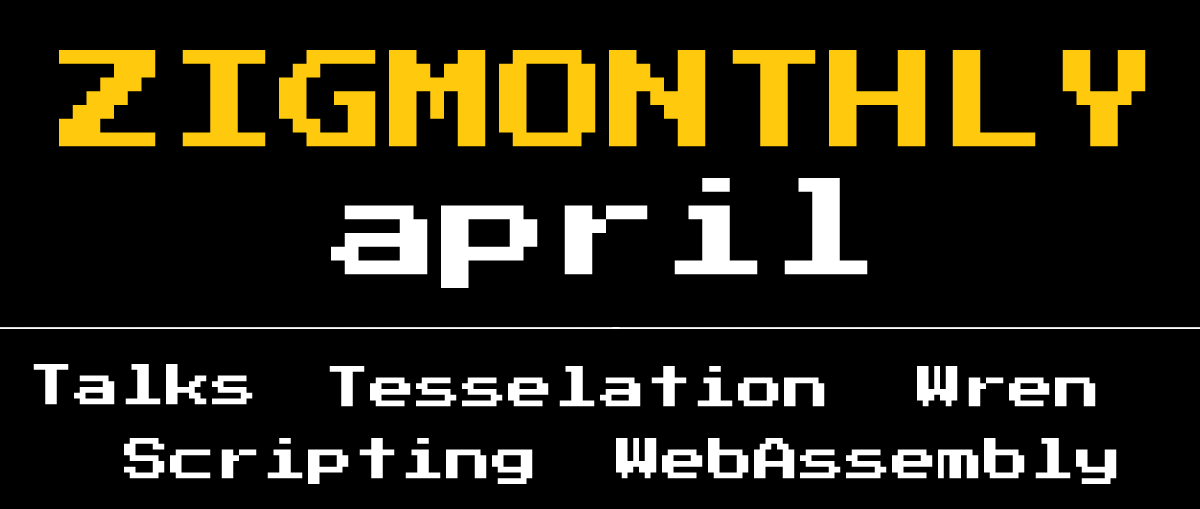
<style>
.page{position:relative;width:1200px;height:509px;background:#000000}
.page>*{position:absolute;margin:0}
.t1{font:110px "PressStart2P-Regular";color:#ffc90e}
.t2{font:110px "PressStart2P-Regular";color:#ffffff}
.t3{font:46px "PressStart2P-Regular";color:#ffffff}
</style>
<div class="page">
<p class="t1" style="left:59px;top:50px;width:1087px;height:97px">ZIGMONTHLY</p>
<p class="t2" style="left:331px;top:178px;width:537px;height:110px">april</p>
<p class="t3" style="left:33px;top:364px;width:220px;height:41px">Talks</p>
<p class="t3" style="left:329px;top:366px;width:496px;height:41px">Tesselation</p>
<p class="t3" style="left:917px;top:366px;width:179px;height:41px">Wren</p>
<p class="t3" style="left:124px;top:438px;width:409px;height:46px">Scripting</p>
<p class="t3" style="left:616px;top:438px;width:501px;height:46px">WebAssembly</p>
</div>
